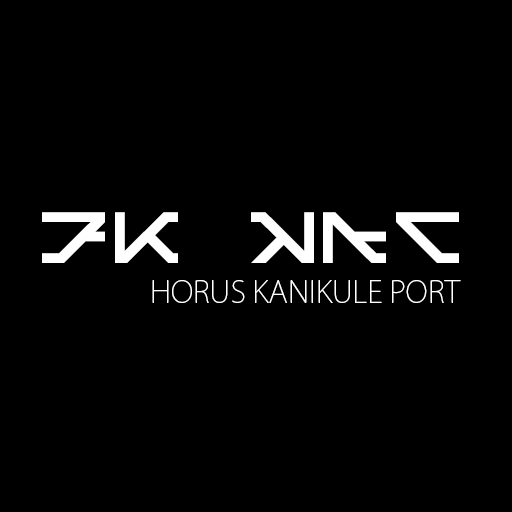
<style>
.page{position:relative;width:512px;height:512px;background:#000000}
.page>*{position:absolute;margin:0}
.t1{font:77.2px "Septambres-Neau";color:#ffffff}
.t2{font:30px "KozGoPro-ExtraLight";color:#ffffff}
</style>
<div class="page">
<p class="t1" style="left:42px;top:212px;width:417px;height:51px">dZ Cqf</p>
<p class="t2" style="left:152px;top:280px;width:309px;height:23px">HORUS KANIKULE PORT</p>
</div>
